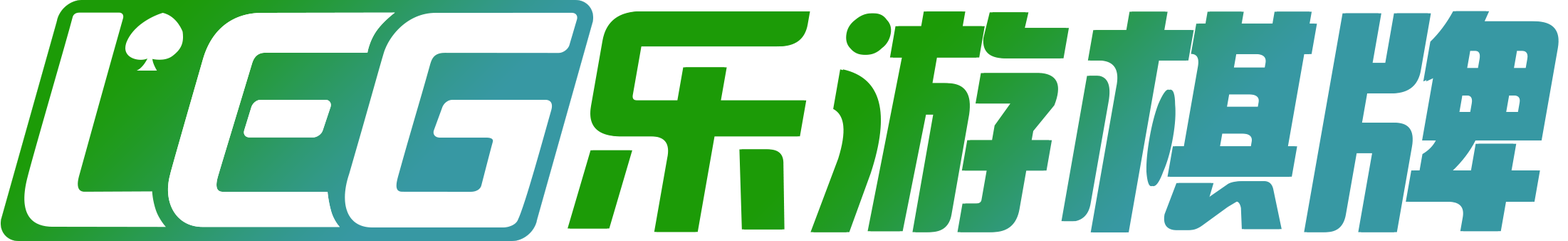
<style>
.page{position:relative;width:1568px;height:241px;background:#ffffff}
.page>*{position:absolute;margin:0}
.t1{font:234.8px "FZHZGBJW--GB1-0";letter-spacing:0.05em;font-style:italic}
</style>
<div class="page">
<p class="t1" style="left:570px;top:11px;width:989px;height:221px">乐游棋牌</p>
</div>
